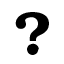
<style>
.page{position:relative;width:64px;height:64px;background:#ffffff}
.page>*{position:absolute;margin:0}
.t1{font:60.6px "TeXGyreBonum-Bold";color:#000000}
</style>
<div class="page">
<p class="t1" style="left:15px;top:12px;width:34px;height:43px">?</p>
</div>
